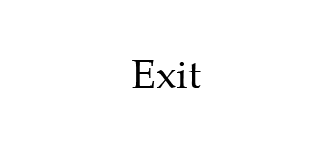
<style>
.page{position:relative;width:332px;height:162px;background:#ffffff}
.page>*{position:absolute;margin:0}
.t1{font:40px "BookAntiqua";color:#000000}
</style>
<div class="page">
<p class="t1" style="left:132px;top:60px;width:69px;height:28px">Exit</p>
</div>
